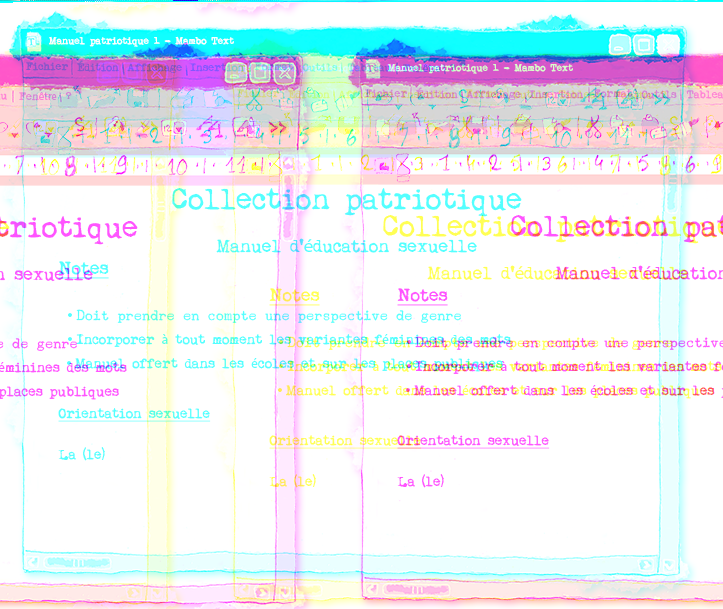
<style>
.page{position:relative;width:723px;height:609px;background:#ffffff}
.page>*{position:absolute;margin:0}
.t1{font:14px/24px "UnderwoodChampion"}
.t2{font:30px "MyUnderwood"}
.t3{font:18px "MyUnderwood"}
.t4{font:18px "MyriadPro-Regular"}
.t5{font:18px "MyUnderwood";text-decoration:underline}
.t6{font:18px/24px "MyriadPro-Regular"}
.t7{font:14px/24px "MyUnderwood"}
.t8{font:14px/24px "MyriadPro-Regular"}
.t9{font:14px "MyUnderwood";text-decoration:underline}
</style>
<div class="page">
<p class="t1" style="left:58px;top:186px;width:464px;height:273px;text-align:center"><span class="t2">Collection patriotique</span><span class="t3"><br><br>Manuel d’</span><span class="t4">é</span><span class="t3">ducation sexuelle <br></span><span class="t5">Notes<br><br> </span><span class="t6">• </span>Doit prendre en compte une perspective de genre<br> <span class="t6">• </span><span class="t7">Incorporer </span><span class="t8">à</span><span class="t7"> tout moment les variantes f</span><span class="t8">é</span><span class="t7">minines des mots<br></span><span class="t6">  • </span><span class="t7">Manuel offert dans les </span><span class="t8">é</span><span class="t7">coles et sur les places publiques<br><br><br></span><span class="t9">Orientation sexuelle<br><br></span><span class="t7">La (le)</span></p>
</div>
